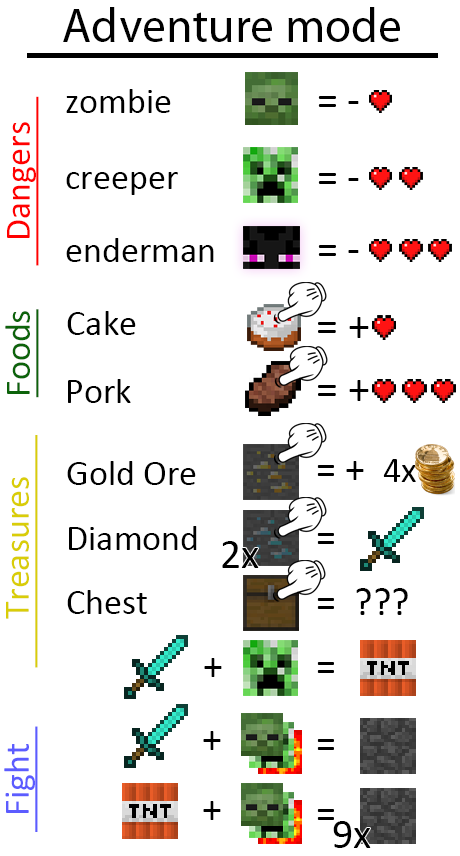
<style>
.page{position:relative;width:460px;height:856px;background:#ffffff}
.page>*{position:absolute;margin:0}
.t1{font:48px "MyriadPro-Regular";color:#000000}
.t2{font:36px "Calibri";color:#000000}
.t3{font:36px "Calibri";color:#ff0000;text-decoration:underline}
.t4{font:42.1px "Calibri";color:#000000}
.t5{font:36px "Calibri";color:#0c630a;text-decoration:underline}
.t6{font:44px "Calibri";color:#000000}
.t7{font:36px "Calibri";color:#d9cd08;text-decoration:underline}
.t8{font:40px "Calibri";color:#000000}
.t9{font:42px "Calibri";color:#000000}
.t10{font:36px "Calibri";color:#5c5cff;text-decoration:underline}
</style>
<div class="page">
<p class="t1" style="left:63px;top:7px;width:337px;height:35px">Adventure mode</p>
<p class="t2" style="left:66px;top:89px;width:105px;height:24px">zombie</p>
<p class="t3" style="left:7px;top:96px;width:32px;height:170px;rotate:-90deg">Dangers</p>
<p class="t4" style="left:318px;top:96px;width:41px;height:11px">= -</p>
<p class="t2" style="left:66px;top:172px;width:112px;height:23px">creeper</p>
<p class="t4" style="left:318px;top:173px;width:41px;height:11px">= -</p>
<p class="t2" style="left:66px;top:238px;width:148px;height:24px">enderman</p>
<p class="t4" style="left:318px;top:245px;width:41px;height:11px">= -</p>
<p class="t5" style="left:5px;top:309px;width:34px;height:89px;rotate:-90deg">Foods</p>
<p class="t2" style="left:67px;top:311px;width:69px;height:24px">Cake</p>
<p class="t6" style="left:318px;top:317px;width:51px;height:21px">= +</p>
<p class="t2" style="left:68px;top:379px;width:63px;height:24px">Pork</p>
<p class="t6" style="left:318px;top:380px;width:51px;height:21px">= +</p>
<p class="t7" style="left:6px;top:435px;width:32px;height:233px;rotate:-90deg">Treasures</p>
<p class="t2" style="left:67px;top:461px;width:129px;height:24px">Gold Ore</p>
<p class="t8" style="left:317px;top:459px;width:99px;height:23px">= +  <span class="t2">4x</span></p>
<p class="t2" style="left:69px;top:526px;width:128px;height:24px">Diamond</p>
<p class="t8" style="left:317px;top:533px;width:17px;height:11px">=</p>
<p class="t9" style="left:222px;top:541px;width:37px;height:27px">2x</p>
<p class="t2" style="left:67px;top:590px;width:80px;height:24px">Chest</p>
<p class="t8" style="left:317px;top:588px;width:91px;height:27px">=  ???</p>
<p class="t8" style="left:204px;top:658px;width:18px;height:19px">+</p>
<p class="t8" style="left:317px;top:662px;width:17px;height:11px">=</p>
<p class="t10" style="left:4px;top:726px;width:34px;height:106px;rotate:-90deg">Fight</p>
<p class="t8" style="left:203px;top:731px;width:18px;height:19px">+</p>
<p class="t8" style="left:317px;top:739px;width:17px;height:11px">=</p>
<p class="t8" style="left:203px;top:801px;width:18px;height:19px">+</p>
<p class="t8" style="left:317px;top:809px;width:17px;height:11px">=</p>
<p class="t9" style="left:333px;top:821px;width:38px;height:27px">9x</p>
</div>
